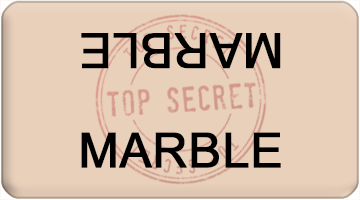
<style>
.page{position:relative;width:360px;height:200px;background:#e8d0bb}
.page>*{position:absolute;margin:0}
.t1{font:48px "ArialMT";color:#000000;font-weight:bold}
</style>
<div class="page">
<p class="t1" style="left:81px;top:33px;width:200px;height:36px;rotate:180deg">MARBLE</p>
<p class="t1" style="left:81px;top:132px;width:200px;height:36px">MARBLE</p>
</div>
